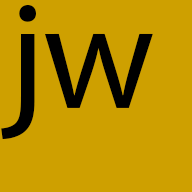
<style>
.page{position:relative;width:192px;height:192px;background:#cea000}
.page>*{position:absolute;margin:0}
.t1{font:153.3px "MyriadPro-Regular";letter-spacing:-0.022em;color:#000000}
</style>
<div class="page">
<p class="t1" style="left:1px;top:4px;width:152px;height:135px">jw</p>
</div>
